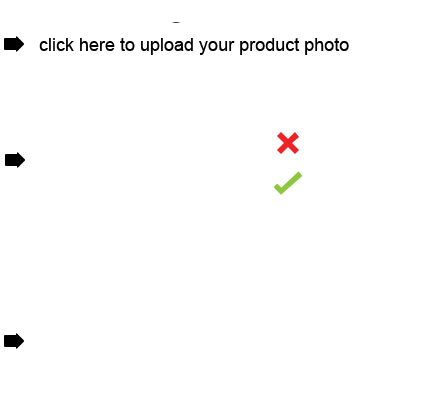
<style>
.page{position:relative;width:428px;height:406px;background:#ffffff}
.page>*{position:absolute;margin:0}
.t1{font:18px "ArialMT";color:#000000}
</style>
<div class="page">
<p class="t1" style="left:39px;top:38px;width:310px;height:17px">click here to upload your product photo</p>
</div>
